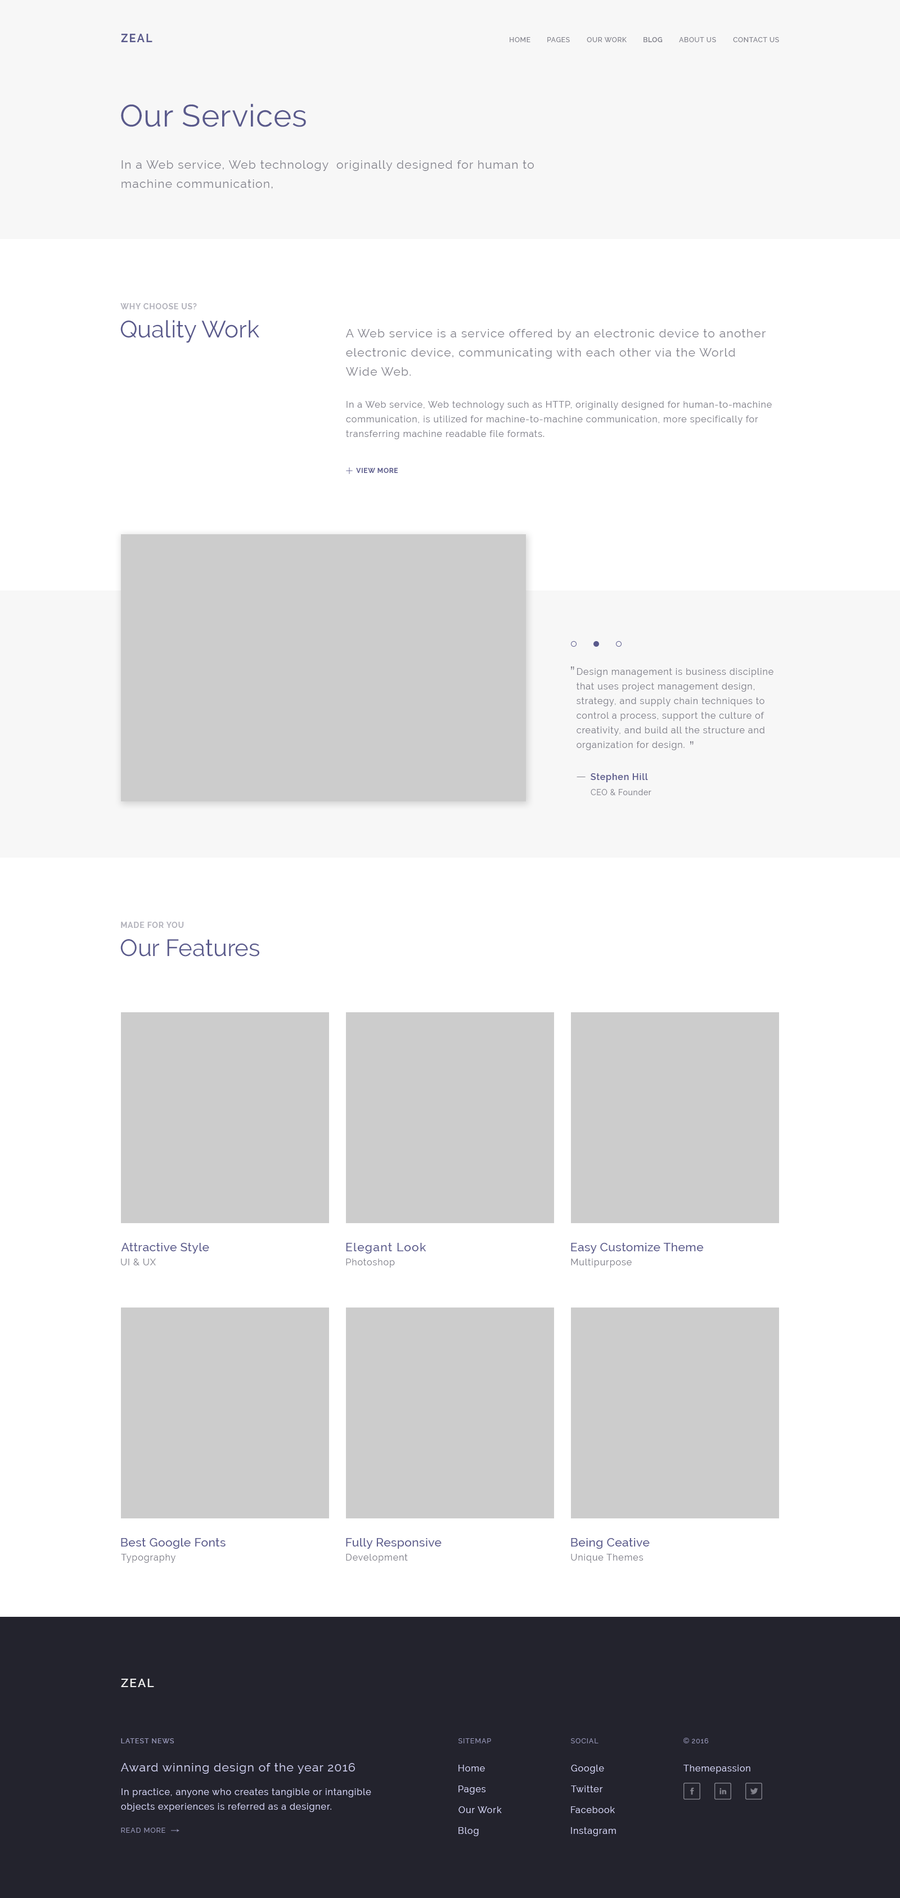
<style>
.page{position:relative;width:900px;height:1898px;background:#ffffff}
.page>*{position:absolute;margin:0}
.t1{font:11.2px "Raleway-Bold";letter-spacing:0.1em;color:#5a5a8c}
.t2{font:6.8px "Raleway-Medium";letter-spacing:0.06em;color:#82828c}
.t3{font:6.8px "Raleway-SemiBold";letter-spacing:0.06em;color:#82828c}
.t4{font:30.9px "Raleway-Regular";letter-spacing:0.02em;color:#5a5a8c}
.t5{font:11.8px/19.1px "Raleway-Regular";letter-spacing:0.06em;color:#82828c}
.t6{font:7.9px "Raleway-Bold";letter-spacing:0.06em;color:#b3b3bc}
.t7{font:23.6px "Raleway-Regular";color:#5a5a8c}
.t8{font:9px/14.6px "Raleway-Regular";letter-spacing:0.06em;color:#82828c}
.t9{font:6.8px "Raleway-Bold";letter-spacing:0.06em;color:#5a5a8c}
.t10{font:16.9px "Raleway-Regular";letter-spacing:0.051em;color:#82828c}
.t11{font:9px "Raleway-SemiBold";letter-spacing:0.051em;color:#5a5a8c}
.t12{font:7.9px "Raleway-Regular";letter-spacing:0.051em;color:#82828c}
.t13{font:11.8px "Raleway-Medium";letter-spacing:0.02em;color:#5a5a8c}
.t14{font:11.8px "Raleway-Medium";letter-spacing:0.06em;color:#5a5a8c}
.t15{font:9px "Raleway-Regular";letter-spacing:0.06em;color:#82828c}
.t16{font:11.8px "Raleway-SemiBold";letter-spacing:0.1em;color:#eeeeee}
.t17{font:6.8px "Raleway-Medium";letter-spacing:0.1em;color:#9797b8}
.t18{font:6.8px "Raleway-Regular";letter-spacing:0.1em;color:#9797b8}
.t19{font:11.8px "Raleway-Regular";letter-spacing:0.06em;color:#d0d0f0}
.t20{font:9px "Raleway-Regular";letter-spacing:0.06em;color:#d0d0f0}
.t21{font:9px/14.6px "Raleway-Regular";letter-spacing:0.06em;color:#d0d0f0}
</style>
<div class="page">
<p class="t1" style="left:121px;top:34px;width:31px;height:8px">ZEAL</p>
<p class="t2" style="left:510px;top:37px;width:20px;height:5px">HOME</p>
<p class="t2" style="left:547px;top:37px;width:23px;height:5px">PAGES</p>
<p class="t2" style="left:587px;top:37px;width:40px;height:5px">OUR WORK</p>
<p class="t3" style="left:644px;top:37px;width:19px;height:5px">BLOG</p>
<p class="t2" style="left:679px;top:37px;width:37px;height:5px">ABOUT US</p>
<p class="t2" style="left:733px;top:37px;width:46px;height:5px">CONTACT US</p>
<p class="t4" style="left:121px;top:104px;width:185px;height:23px">Our Services</p>
<p class="t5" style="left:122px;top:160px;width:412px;height:29px;text-align:right">In a Web service, Web technology  originally designed for human to<br>machine communication,</p>
<p class="t6" style="left:120px;top:303px;width:77px;height:6px">WHY CHOOSE US?</p>
<p class="t7" style="left:120px;top:320px;width:139px;height:23px">Quality Work</p>
<p class="t5" style="left:346px;top:329px;width:420px;height:47px;text-align:right">A Web service is a service offered by an electronic device to another<br>electronic device, communicating with each other via the World<br>Wide Web.</p>
<p class="t8" style="left:346px;top:401px;width:426px;height:38px;text-align:right">In a Web service, Web technology such as HTTP, originally designed for human-to-machine<br>communication, is utilized for machine-to-machine communication, more specifically for<br>transferring machine readable file formats.</p>
<p class="t9" style="left:356px;top:468px;width:42px;height:5px">VIEW MORE</p>
<p class="t10" style="left:571px;top:667px;width:3px;height:3px">“</p>
<p class="t8" style="left:577px;top:668px;width:196px;height:82px;text-align:right">Design management is business discipline<br>that uses project management design,<br>strategy, and supply chain techniques to<br>control a process, support the culture of<br>creativity, and build all the structure and<br>organization for design.</p>
<p class="t10" style="left:690px;top:741px;width:4px;height:4px">“</p>
<p class="t11" style="left:591px;top:773px;width:57px;height:9px">Stephen Hill</p>
<p class="t12" style="left:591px;top:789px;width:60px;height:6px">CEO &amp; Founder</p>
<p class="t6" style="left:121px;top:922px;width:63px;height:6px">MADE FOR YOU</p>
<p class="t7" style="left:120px;top:939px;width:139px;height:18px">Our Features</p>
<p class="t13" style="left:121px;top:1243px;width:88px;height:11px">Attractive Style</p>
<p class="t14" style="left:346px;top:1243px;width:80px;height:11px">Elegant Look</p>
<p class="t13" style="left:571px;top:1243px;width:133px;height:11px">Easy Customize Theme</p>
<p class="t15" style="left:121px;top:1259px;width:35px;height:7px">UI &amp; UX</p>
<p class="t15" style="left:346px;top:1259px;width:49px;height:9px">Photoshop</p>
<p class="t15" style="left:571px;top:1259px;width:61px;height:9px">Multipurpose</p>
<p class="t13" style="left:121px;top:1538px;width:105px;height:11px">Best Google Fonts</p>
<p class="t13" style="left:346px;top:1538px;width:96px;height:11px">Fully Responsive</p>
<p class="t13" style="left:571px;top:1538px;width:79px;height:11px">Being Ceative</p>
<p class="t15" style="left:121px;top:1554px;width:55px;height:9px">Typography</p>
<p class="t15" style="left:346px;top:1554px;width:62px;height:9px">Development</p>
<p class="t15" style="left:571px;top:1554px;width:73px;height:9px">Unique Themes</p>
<p class="t16" style="left:121px;top:1679px;width:33px;height:9px">ZEAL</p>
<p class="t17" style="left:121px;top:1739px;width:53px;height:5px">LATEST NEWS</p>
<p class="t18" style="left:458px;top:1739px;width:33px;height:5px">SITEMAP</p>
<p class="t18" style="left:571px;top:1739px;width:27px;height:5px">SOCIAL</p>
<p class="t18" style="left:692px;top:1739px;width:17px;height:5px">2016</p>
<p class="t19" style="left:121px;top:1763px;width:234px;height:11px">Award winning design of the year 2016</p>
<p class="t20" style="left:458px;top:1765px;width:27px;height:7px">Home</p>
<p class="t20" style="left:571px;top:1765px;width:33px;height:9px">Google</p>
<p class="t20" style="left:683px;top:1765px;width:67px;height:9px">Themepassion</p>
<p class="t21" style="left:121px;top:1789px;width:250px;height:23px;text-align:right">In practice, anyone who creates tangible or intangible<br>objects experiences is referred as a designer.</p>
<p class="t20" style="left:458px;top:1786px;width:28px;height:9px">Pages</p>
<p class="t20" style="left:571px;top:1786px;width:32px;height:7px">Twitter</p>
<p class="t20" style="left:458px;top:1807px;width:44px;height:7px">Our Work</p>
<p class="t20" style="left:571px;top:1807px;width:44px;height:7px">Facebook</p>
<p class="t18" style="left:121px;top:1828px;width:44px;height:5px">READ MORE</p>
<p class="t20" style="left:458px;top:1828px;width:21px;height:9px">Blog</p>
<p class="t20" style="left:571px;top:1828px;width:45px;height:9px">Instagram</p>
</div>
